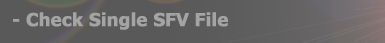
<style>
.page{position:relative;width:385px;height:43px;background:#595959}
.page>*{position:absolute;margin:0}
.t1{font:18px "Tahoma-Bold";color:#a4a4a4;font-weight:bold}
</style>
<div class="page">
<p class="t1" style="left:13px;top:12px;width:215px;height:18px">- Check Single SFV File</p>
</div>
